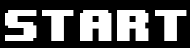
<style>
.page{position:relative;width:190px;height:48px;background:#000000}
.page>*{position:absolute;margin:0}
.t1{font:37.5px "8BITWONDERNominal";color:#ffffff}
</style>
<div class="page">
<p class="t1" style="left:5px;top:10px;width:182px;height:31px">Start</p>
</div>
